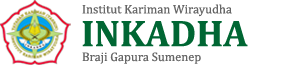
<style>
.page{position:relative;width:296px;height:65px;background:#ffffff}
.page>*{position:absolute;margin:0}
.t1{font:12.5px "Cambria";color:#666666}
.t2{font:37.5px "Cambria-Bold";color:#006633}
</style>
<div class="page">
<p class="t1" style="left:82px;top:4px;width:150px;height:13px">Institut Kariman Wirayudha</p>
<p class="t2" style="left:82px;top:21px;width:166px;height:26px">INKADHA</p>
<p class="t1" style="left:82px;top:52px;width:119px;height:12px">Braji Gapura Sumenep</p>
</div>
